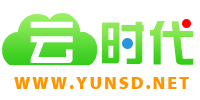
<style>
.page{position:relative;width:200px;height:100px;background:#ffffff}
.page>*{position:absolute;margin:0}
.t1{font:48px "JZhongYi";letter-spacing:0.05em;color:#ffffff}
.t2{font:18.4px "MyriadProTT-Black";letter-spacing:0.1em;color:#ff9500;text-transform:uppercase}
</style>
<div class="page">
<p class="t1" style="left:30px;top:21px;width:43px;height:42px">云</p>
<p class="t2" style="left:14px;top:77px;width:175px;height:12px">WWW.Yunsd.net</p>
</div>
